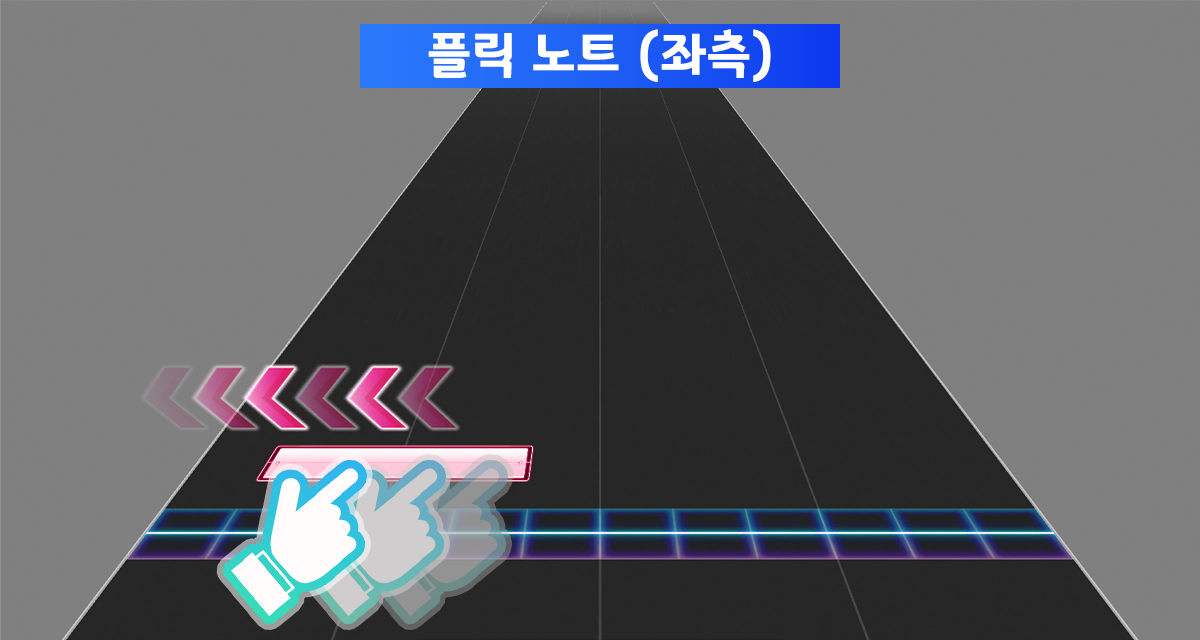
<style>
.page{position:relative;width:1200px;height:640px;background:#808080}
.page>*{position:absolute;margin:0}
.t1{font:50.7px "GyeonggiTitleB";letter-spacing:0.03em;color:#ffffff}
</style>
<div class="page">
<p class="t1" style="left:428px;top:29px;width:343px;height:53px">플릭 노트 (좌측)</p>
</div>
